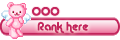
<style>
.page{position:relative;width:120px;height:40px;background:#ffffff}
.page>*{position:absolute;margin:0}
.t1{font:12px "Alba";color:#c3255c}
</style>
<div class="page">
<p class="t1" style="left:32px;top:7px;width:28px;height:9px">000</p>
<p class="t1" style="left:37px;top:21px;width:52px;height:13px">Rank here</p>
</div>
